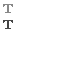
<style>
.page{position:relative;width:80px;height:80px;background:#ffffff}
.page>*{position:absolute;margin:0}
.t1{font:12px "CenturySchoolbook-Bold";color:#888888;scale:1.24 1}
.t2{font:11.8px "CenturySchoolbook-Bold";color:#454545;scale:1.26 1}
</style>
<div class="page">
<p class="t1" style="left:3px;top:4px;width:10px;height:9px">T</p>
<p class="t2" style="left:3px;top:20px;width:10px;height:9px">T</p>
</div>
